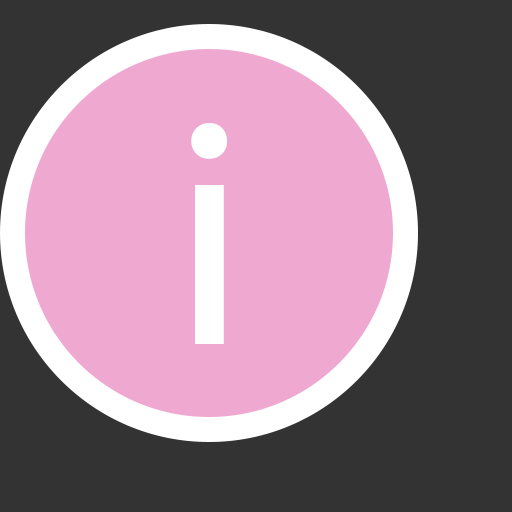
<style>
.page{position:relative;width:512px;height:512px;background:#333333}
.page>*{position:absolute;margin:0}
.t1{font:328px "MyriadPro-Regular";color:#ffffff}
</style>
<div class="page">
<p class="t1" style="left:191px;top:123px;width:36px;height:221px">i</p>
</div>
